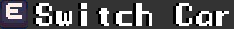
<style>
.page{position:relative;width:234px;height:29px;background:#333333}
.page>*{position:absolute;margin:0}
.t1{font:30px "ManaspaceReg";color:#ffffff}
</style>
<div class="page">
<p class="t1" style="left:36px;top:3px;width:193px;height:23px">Switch Car</p>
</div>
